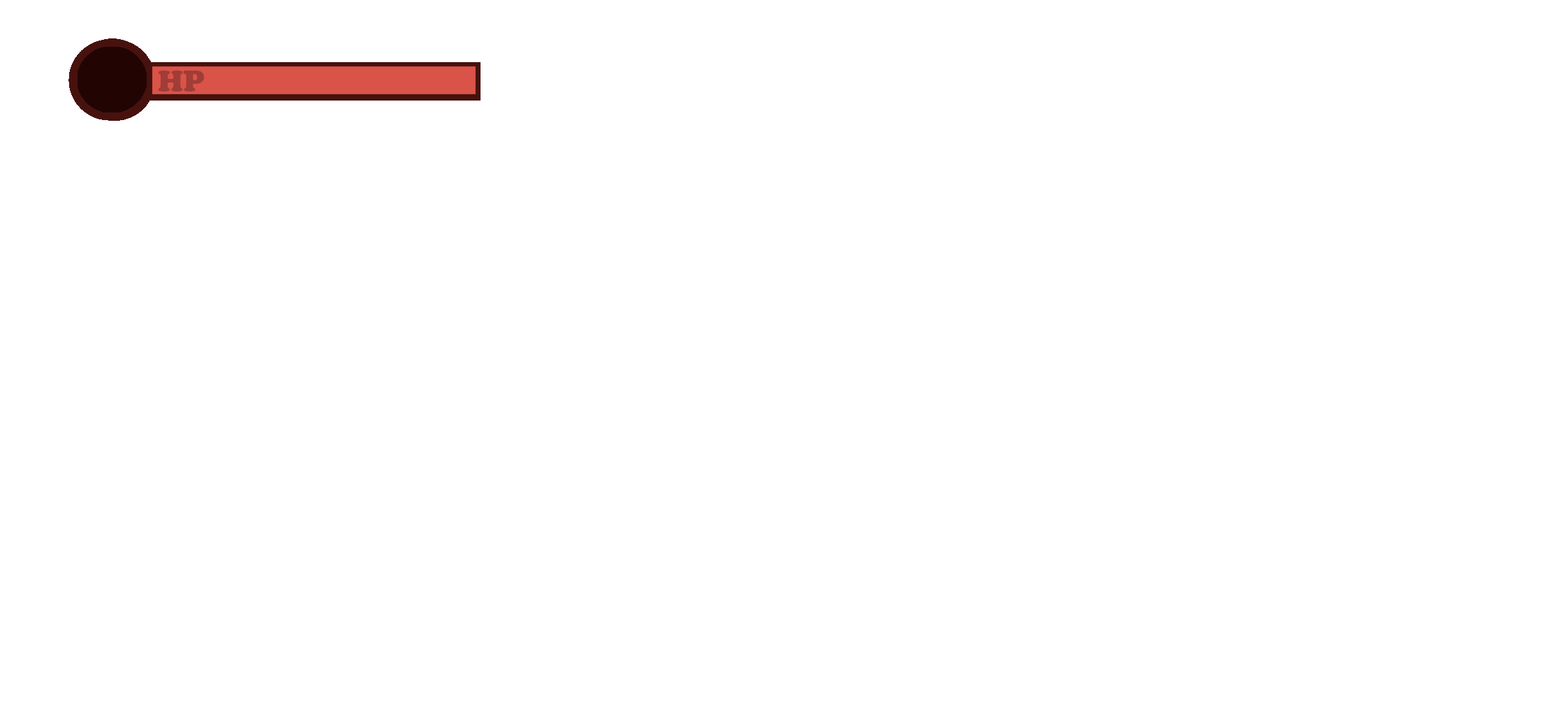
<style>
.page{position:relative;width:1568px;height:715px;background:#ffffff}
.page>*{position:absolute;margin:0}
.t1{font:31.4px "CooperBlack";color:#a03d36}
</style>
<div class="page">
<p class="t1" style="left:158px;top:71px;width:47px;height:20px">HP</p>
</div>
